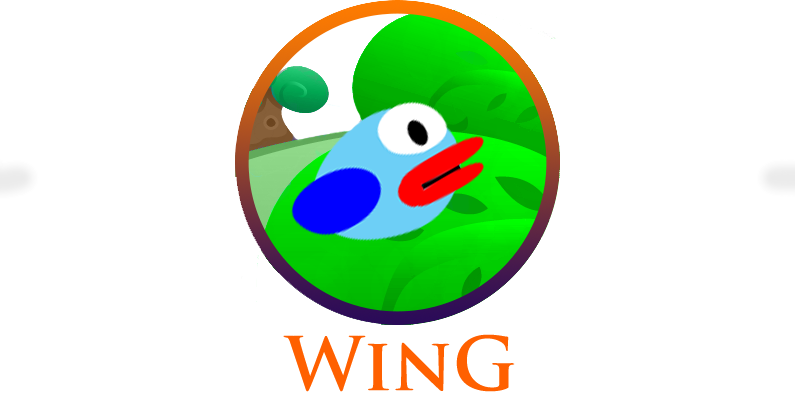
<style>
.page{position:relative;width:795px;height:413px;background:#ffffff}
.page>*{position:absolute;margin:0}
.t1{font:72px "TrajanPro-Bold";color:#ff6000}
</style>
<div class="page">
<p class="t1" style="left:283px;top:334px;width:232px;height:58px">WinG</p>
</div>
